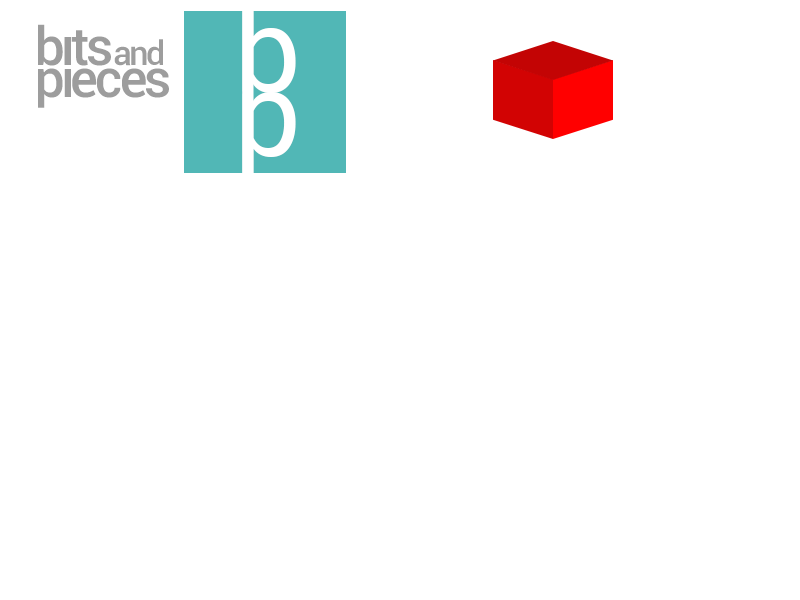
<style>
.page{position:relative;width:800px;height:600px;background:#ffffff}
.page>*{position:absolute;margin:0}
.t1{font:118px "Roboto-Regular";letter-spacing:0.01em;color:#ffffff}
.t2{font:34px/32px "Roboto-Medium";letter-spacing:-0.075em;color:#9d9d9d}
.t3{font:53px/32px "Roboto-Medium";letter-spacing:-0.075em;color:#9d9d9d}
.t4{font:53px/32px "Roboto-Medium";letter-spacing:-0.065em;color:#9d9d9d}
.t5{font:53px/32px "Roboto-Medium";letter-spacing:-0.07em;color:#9d9d9d}
.t6{font:53px/32px "Roboto-Medium";letter-spacing:-0.09em;color:#9d9d9d}
.t7{font:53px/32px "Roboto-Medium";letter-spacing:-0.055em;color:#9d9d9d}
.t8{font:53px/32px "Roboto-Medium";letter-spacing:-0.05em;color:#9d9d9d}
</style>
<div class="page">
<p class="t1" style="left:242px;top:1px;width:54px;height:92px">b</p>
<p class="t2" style="left:38px;top:24px;width:131px;height:84px"><span class="t3">b</span><span class="t4">it</span><span class="t3">s </span>and <br><span class="t5">p</span><span class="t6">i</span><span class="t7">e</span><span class="t8">c</span><span class="t5">es</span></p>
<p class="t1" style="left:242px;top:92px;width:54px;height:92px">b</p>
</div>
